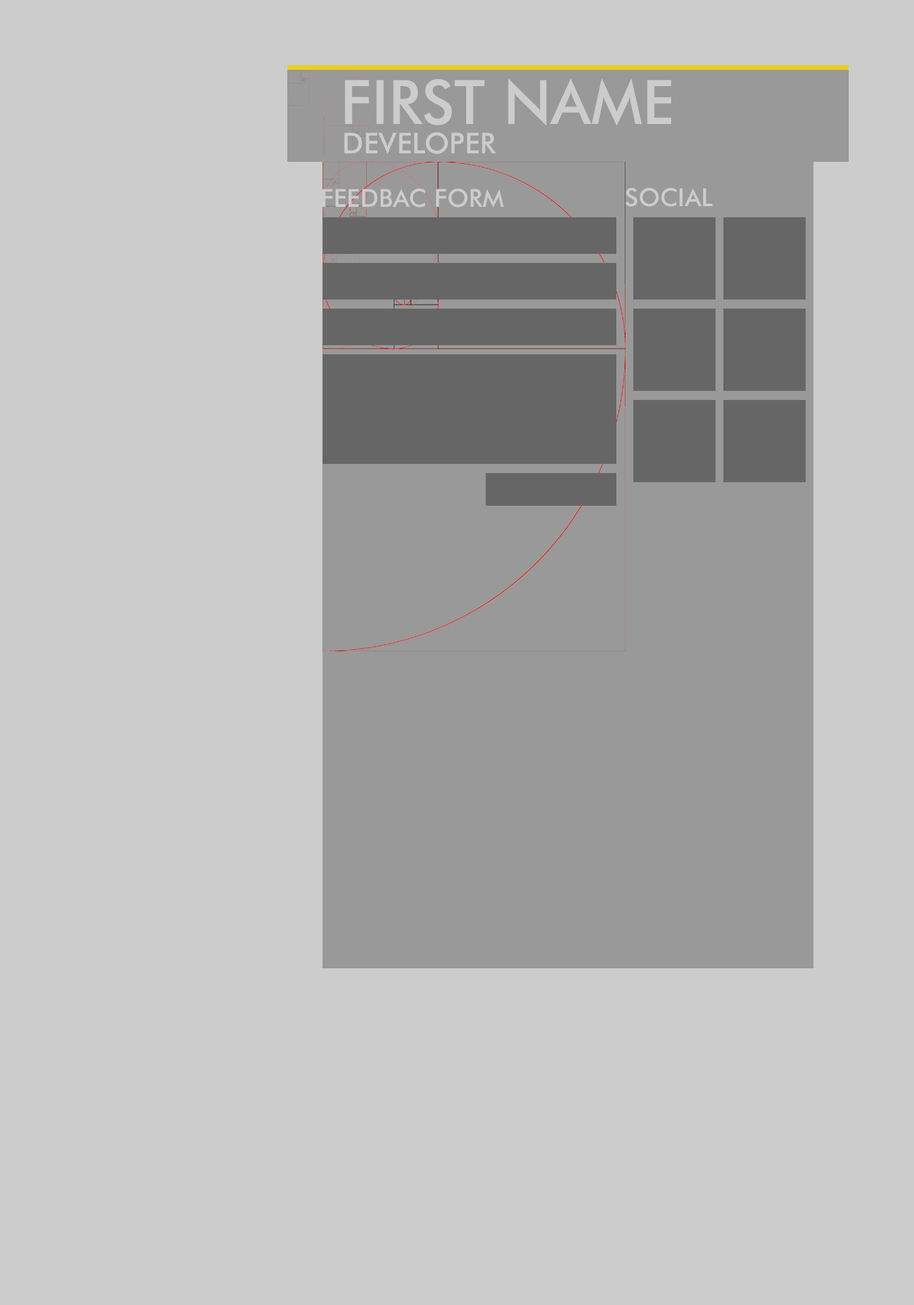
<style>
.page{position:relative;width:914px;height:1305px;background:#cccccc}
.page>*{position:absolute;margin:0}
.t1{font:61.3px "FuturaBT-Medium";color:#cccccc;text-transform:uppercase}
.t2{font:28.7px "FuturaBT-Medium";color:#cccccc;text-transform:uppercase}
.t3{font:24.8px "FuturaBT-Medium";color:#cccccc;text-transform:uppercase}
</style>
<div class="page">
<p class="t1" style="left:345px;top:78px;width:326px;height:48px">FiRST NAME</p>
<p class="t2" style="left:344px;top:132px;width:152px;height:22px">DeVELOPER</p>
<p class="t3" style="left:322px;top:189px;width:182px;height:19px">FEEDBAC FORM</p>
<p class="t3" style="left:625px;top:188px;width:88px;height:19px">SoCIAL</p>
</div>
